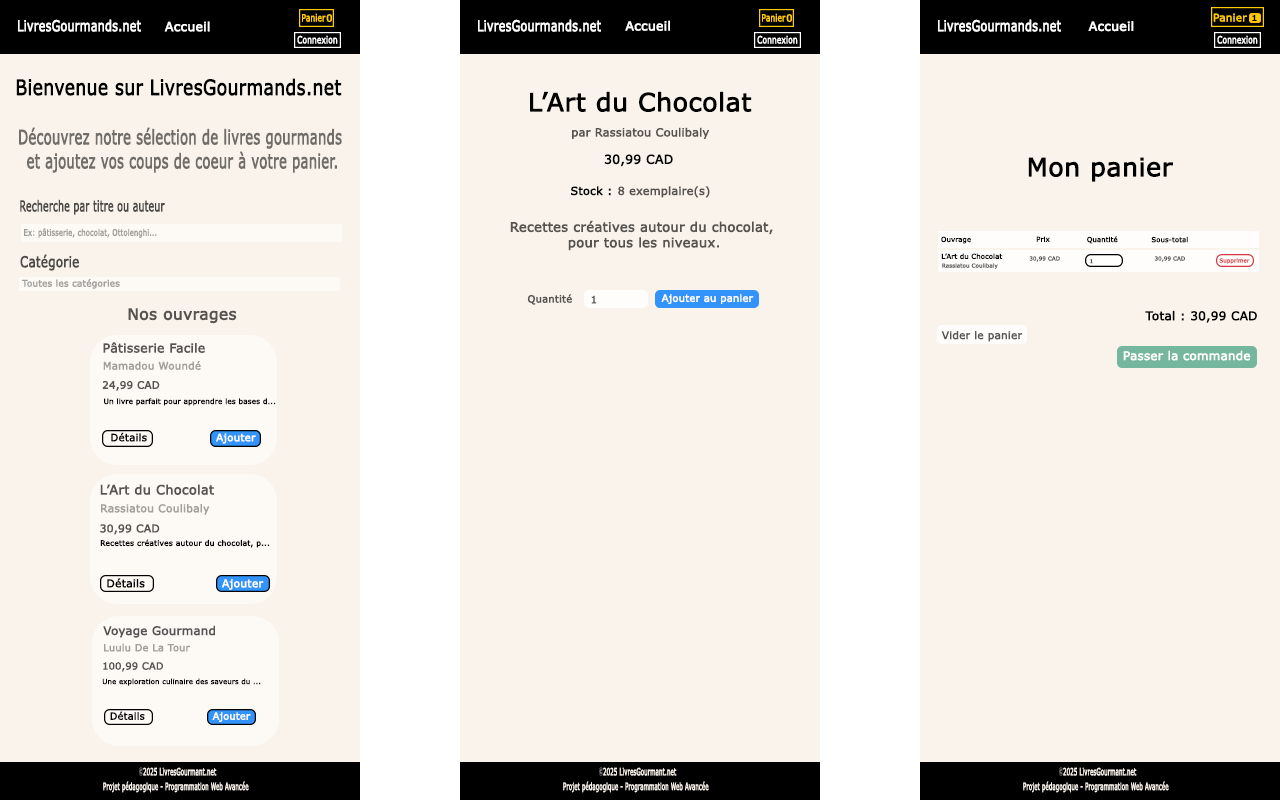
<style>
.page{position:relative;width:1280px;height:800px;background:#faf3eb}
.page>*{position:absolute;margin:0}
.t1{font:10px "MSReferenceSansSerif";color:#ffcc00;font-weight:bold;scale:0.74 1}
.t2{font:10px "MSReferenceSansSerif";color:#ffcc00;font-weight:bold}
.t3{font:10.4px "MSReferenceSansSerif";color:#ffcc00;font-weight:bold}
.t4{font:7.7px "MSReferenceSansSerif";color:#000000;font-weight:bold;scale:1.32 1}
.t5{font:15px "MSReferenceSansSerif";color:#fefefe;font-weight:bold;scale:0.74 1}
.t6{font:12.4px "MSReferenceSansSerif";color:#ffffff;font-weight:bold}
.t7{font:10px "MSReferenceSansSerif";color:#ffffff;font-weight:bold;scale:0.74 1}
.t8{font:21.2px "MSReferenceSansSerif";color:#000000;font-weight:bold;scale:0.8 1}
.t9{font:25px "MSReferenceSansSerif";color:#000000;font-weight:bold}
.t10{font:20px "MSReferenceSansSerif";color:#716e6a;font-weight:bold;scale:0.65 1}
.t11{font:11.2px "MSReferenceSansSerif";color:#565350;font-weight:bold}
.t12{font:12.3px "MSReferenceSansSerif";color:#000000;font-weight:bold}
.t13{font:11.1px "MSReferenceSansSerif";color:#000000;font-weight:bold}
.t14{font:11.1px "MSReferenceSansSerif";color:#565350;font-weight:bold}
.t15{font:15px "MSReferenceSansSerif";color:#4c4a47;font-weight:bold;scale:0.62 1}
.t16{font:13px "MSReferenceSansSerif";color:#565350;font-weight:bold}
.t17{font:9px "MSReferenceSansSerif";color:#a19f9c;font-weight:bold;scale:0.75 1}
.t18{font:6.8px "MSReferenceSansSerif";color:#000000;font-weight:bold}
.t19{font:15px "MSReferenceSansSerif";color:#4c4a47;font-weight:bold;scale:0.78 1}
.t20{font:5.4px "MSReferenceSansSerif";color:#575756;font-weight:bold}
.t21{font:5.4px "MSReferenceSansSerif";color:#585857;font-weight:bold}
.t22{font:5.4px "MSReferenceSansSerif";color:#d73747;font-weight:bold}
.t23{font:9px "MSReferenceSansSerif";color:#a19f9c;font-weight:bold}
.t24{font:9.9px "MSReferenceSansSerif";color:#565350;font-weight:bold}
.t25{font:9.9px "MSReferenceSansSerif";color:#ffffff;font-weight:bold}
.t26{font:9.9px "MSReferenceSansSerif";color:#575756;font-weight:bold}
.t27{font:15.4px "MSReferenceSansSerif";color:#565350;font-weight:bold}
.t28{font:11.9px "MSReferenceSansSerif";color:#000000;font-weight:bold}
.t29{font:12.2px "MSReferenceSansSerif";color:#575554;font-weight:bold}
.t30{font:10.4px "MSReferenceSansSerif";color:#575756;font-weight:bold}
.t31{font:11.8px "MSReferenceSansSerif";color:#ffffff;font-weight:bold}
.t32{font:10.2px "MSReferenceSansSerif";color:#a19f9c;font-weight:bold}
.t33{font:10.2px "MSReferenceSansSerif";color:#575554;font-weight:bold}
.t34{font:7.2px "MSReferenceSansSerif";color:#000000;font-weight:bold}
.t35{font:10.2px "MSReferenceSansSerif";color:#000000;font-weight:bold}
.t36{font:10.2px "MSReferenceSansSerif";color:#ffffff;font-weight:bold}
.t37{font:12.8px "MSReferenceSansSerif";color:#575554;font-weight:bold}
.t38{font:10.7px "MSReferenceSansSerif";color:#a19f9c;font-weight:bold}
.t39{font:10.7px "MSReferenceSansSerif";color:#575554;font-weight:bold}
.t40{font:7.5px "MSReferenceSansSerif";color:#000000;font-weight:bold}
.t41{font:10.7px "MSReferenceSansSerif";color:#000000;font-weight:bold}
.t42{font:10.7px "MSReferenceSansSerif";color:#ffffff;font-weight:bold}
.t43{font:11.7px "MSReferenceSansSerif";color:#575554;font-weight:bold}
.t44{font:9.7px "MSReferenceSansSerif";color:#a19f9c;font-weight:bold}
.t45{font:9.7px "MSReferenceSansSerif";color:#575554;font-weight:bold}
.t46{font:6.9px "MSReferenceSansSerif";color:#000000;font-weight:bold}
.t47{font:9.7px "MSReferenceSansSerif";color:#000000;font-weight:bold}
.t48{font:9.7px "MSReferenceSansSerif";color:#ffffff;font-weight:bold}
.t49{font:10px "MSReferenceSansSerif";color:#faf3eb;font-weight:bold;scale:0.54 1}
</style>
<div class="page">
<p class="t1" style="left:302px;top:13px;width:24px;height:9px">Panier</p>
<p class="t2" style="left:326px;top:14px;width:6px;height:8px">0</p>
<p class="t1" style="left:762px;top:13px;width:24px;height:9px">Panier</p>
<p class="t2" style="left:786px;top:14px;width:6px;height:8px">0</p>
<p class="t3" style="left:1213px;top:13px;width:34px;height:9px">Panier</p>
<p class="t4" style="left:1252px;top:15px;width:5px;height:6px">1</p>
<p class="t5" style="left:18px;top:19px;width:123px;height:13px">LivresGourmands.net</p>
<p class="t6" style="left:164px;top:21px;width:46px;height:11px">Accueil</p>
<p class="t5" style="left:478px;top:19px;width:123px;height:13px">LivresGourmands.net</p>
<p class="t6" style="left:625px;top:20px;width:45px;height:11px">Accueil</p>
<p class="t5" style="left:938px;top:19px;width:123px;height:13px">LivresGourmands.net</p>
<p class="t6" style="left:1088px;top:21px;width:46px;height:11px">Accueil</p>
<p class="t7" style="left:297px;top:35px;width:41px;height:9px">Connexion</p>
<p class="t7" style="left:757px;top:35px;width:41px;height:9px">Connexion</p>
<p class="t7" style="left:1217px;top:35px;width:41px;height:9px">Connexion</p>
<p class="t8" style="left:16px;top:78px;width:326px;height:18px">Bienvenue sur LivresGourmands.net</p>
<p class="t9" style="left:530px;top:91px;width:222px;height:21px">L’Art du Chocolat</p>
<p class="t10" style="left:19px;top:127px;width:323px;height:46px;text-align:center">Découvrez notre sélection de livres gourmands <br>et ajoutez vos coups de coeur à votre panier.</p>
<p class="t11" style="left:572px;top:127px;width:137px;height:12px">par Rassiatou Coulibaly</p>
<p class="t12" style="left:604px;top:154px;width:69px;height:13px">30,99 CAD</p>
<p class="t9" style="left:1028px;top:157px;width:145px;height:25px">Mon panier</p>
<p class="t13" style="left:571px;top:186px;width:40px;height:10px">Stock :</p>
<p class="t14" style="left:618px;top:186px;width:92px;height:12px">8 exemplaire(s)</p>
<p class="t15" style="left:20px;top:199px;width:145px;height:16px">Recherche par titre ou auteur</p>
<p class="t16" style="left:510px;top:220px;width:263px;height:31px;text-align:center">Recettes créatives autour du chocolat, <br>pour tous les niveaux.</p>
<p class="t17" style="left:24px;top:228px;width:133px;height:10px">Ex: pâtisserie, chocolat, Ottolenghi...</p>
<p class="t18" style="left:941px;top:236px;width:30px;height:8px">Ouvrage</p>
<p class="t18" style="left:1036px;top:236px;width:14px;height:6px">Prix</p>
<p class="t18" style="left:1087px;top:236px;width:31px;height:8px">Quantité</p>
<p class="t18" style="left:1151px;top:236px;width:37px;height:7px">Sous-total</p>
<p class="t19" style="left:20px;top:254px;width:59px;height:17px">Catégorie</p>
<p class="t18" style="left:941px;top:253px;width:62px;height:7px">L’Art du Chocolat</p>
<p class="t20" style="left:1029px;top:256px;width:31px;height:6px">30,99 CAD</p>
<p class="t20" style="left:1154px;top:256px;width:31px;height:6px">30,99 CAD</p>
<p class="t20" style="left:942px;top:263px;width:56px;height:6px">Rassiatou Coulibaly</p>
<p class="t21" style="left:1090px;top:259px;width:3px;height:5px">1</p>
<p class="t22" style="left:1219px;top:258px;width:31px;height:6px">Supprimer</p>
<p class="t23" style="left:22px;top:279px;width:98px;height:10px">Toutes les catégories</p>
<p class="t24" style="left:527px;top:294px;width:45px;height:11px">Quantité</p>
<p class="t25" style="left:661px;top:294px;width:93px;height:10px">Ajouter au panier</p>
<p class="t26" style="left:591px;top:295px;width:6px;height:9px">1</p>
<p class="t27" style="left:128px;top:308px;width:109px;height:16px">Nos ouvrages</p>
<p class="t28" style="left:1145px;top:310px;width:112px;height:13px">Total : 30,99 CAD</p>
<p class="t29" style="left:103px;top:342px;width:102px;height:11px">Pâtisserie Facile</p>
<p class="t30" style="left:941px;top:331px;width:82px;height:11px">Vider le panier</p>
<p class="t31" style="left:1123px;top:350px;width:128px;height:11px">Passer la commande</p>
<p class="t32" style="left:103px;top:361px;width:98px;height:9px">Mamadou Woundé</p>
<p class="t33" style="left:102px;top:381px;width:58px;height:10px">24,99 CAD</p>
<p class="t34" style="left:104px;top:398px;width:172px;height:8px">Un livre parfait pour apprendre les bases d...</p>
<p class="t35" style="left:111px;top:432px;width:36px;height:10px">Détails</p>
<p class="t36" style="left:216px;top:433px;width:40px;height:11px">Ajouter</p>
<p class="t37" style="left:100px;top:484px;width:114px;height:11px">L’Art du Chocolat</p>
<p class="t38" style="left:101px;top:504px;width:109px;height:11px">Rassiatou Coulibaly</p>
<p class="t39" style="left:100px;top:524px;width:60px;height:11px">30,99 CAD</p>
<p class="t40" style="left:100px;top:539px;width:169px;height:9px">Recettes créatives autour du chocolat, p...</p>
<p class="t41" style="left:107px;top:578px;width:38px;height:10px">Détails</p>
<p class="t42" style="left:222px;top:579px;width:42px;height:11px">Ajouter</p>
<p class="t43" style="left:103px;top:625px;width:112px;height:13px">Voyage Gourmand</p>
<p class="t44" style="left:104px;top:643px;width:86px;height:9px">Luulu De La Tour</p>
<p class="t45" style="left:103px;top:662px;width:60px;height:10px">100,99 CAD</p>
<p class="t46" style="left:102px;top:678px;width:159px;height:8px">Une exploration culinaire des saveurs du ...</p>
<p class="t47" style="left:110px;top:711px;width:35px;height:9px">Détails</p>
<p class="t48" style="left:212px;top:712px;width:39px;height:10px">Ajouter</p>
<p class="t49" style="left:143px;top:767px;width:74px;height:9px">2025 LivresGourmant.net</p>
<p class="t49" style="left:603px;top:767px;width:74px;height:9px">2025 LivresGourmant.net</p>
<p class="t49" style="left:1063px;top:767px;width:74px;height:9px">2025 LivresGourmant.net</p>
<p class="t49" style="left:103px;top:781px;width:146px;height:12px">Projet pédagogique - Programmation Web Avancée</p>
<p class="t49" style="left:563px;top:781px;width:146px;height:12px">Projet pédagogique - Programmation Web Avancée</p>
<p class="t49" style="left:1023px;top:781px;width:146px;height:12px">Projet pédagogique - Programmation Web Avancée</p>
</div>
